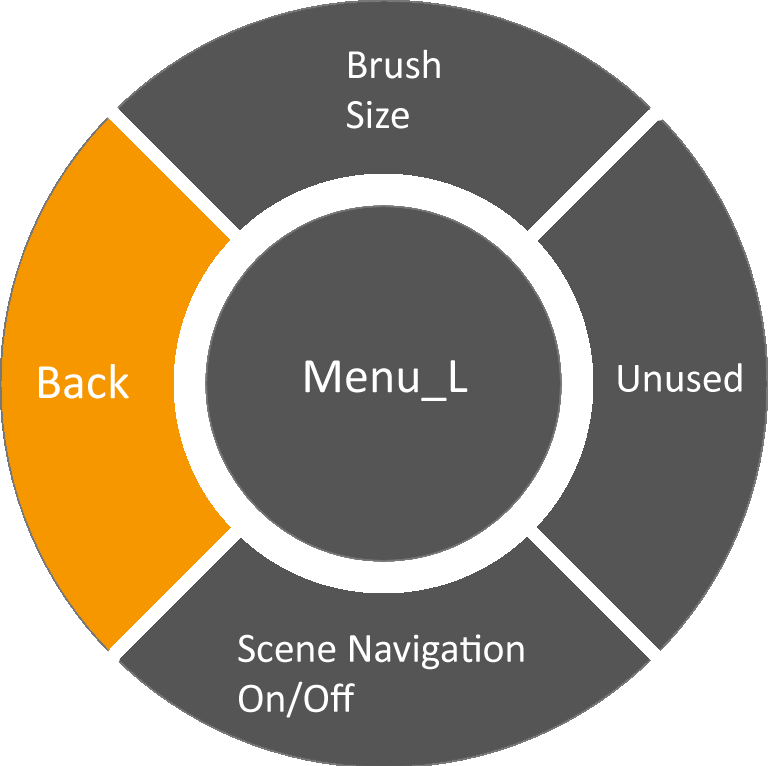
<style>
.page{position:relative;width:768px;height:766px;background:#555555}
.page>*{position:absolute;margin:0}
.t1{font:41.7px "Calibri";color:#ffffff}
.t2{font:50px "Calibri";color:#ffffff}
</style>
<div class="page">
<p class="t1" style="left:347px;top:49px;width:93px;height:80px">Brush <br>Size</p>
<p class="t2" style="left:39px;top:364px;width:90px;height:35px">Back</p>
<p class="t2" style="left:305px;top:360px;width:163px;height:41px">Menu_L</p>
<p class="t1" style="left:618px;top:363px;width:124px;height:29px">Unused</p>
<p class="t1" style="left:238px;top:634px;width:286px;height:84px">Scene Navigation<br>On/Off</p>
</div>
